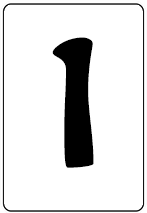
<style>
.page{position:relative;width:147px;height:213px;background:#ffffff}
.page>*{position:absolute;margin:0}
.t1{font:154.6px "HoboStd";color:#000000;scale:1.05 1}
</style>
<div class="page">
<p class="t1" style="left:52px;top:37px;width:42px;height:131px">1</p>
</div>
